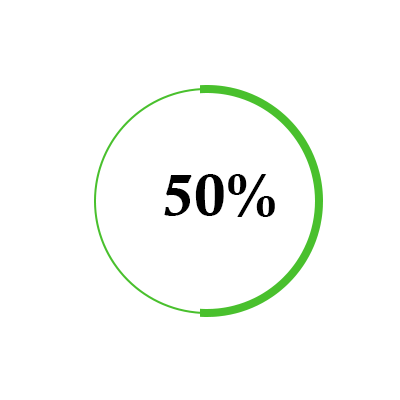
<style>
.page{position:relative;width:400px;height:400px;background:#ffffff}
.page>*{position:absolute;margin:0}
.t1{font:57.5px "CalisMTBol";color:#000000;scale:1.09 1}
</style>
<div class="page">
<p class="t1" style="left:164px;top:174px;width:111px;height:43px">50%</p>
</div>
